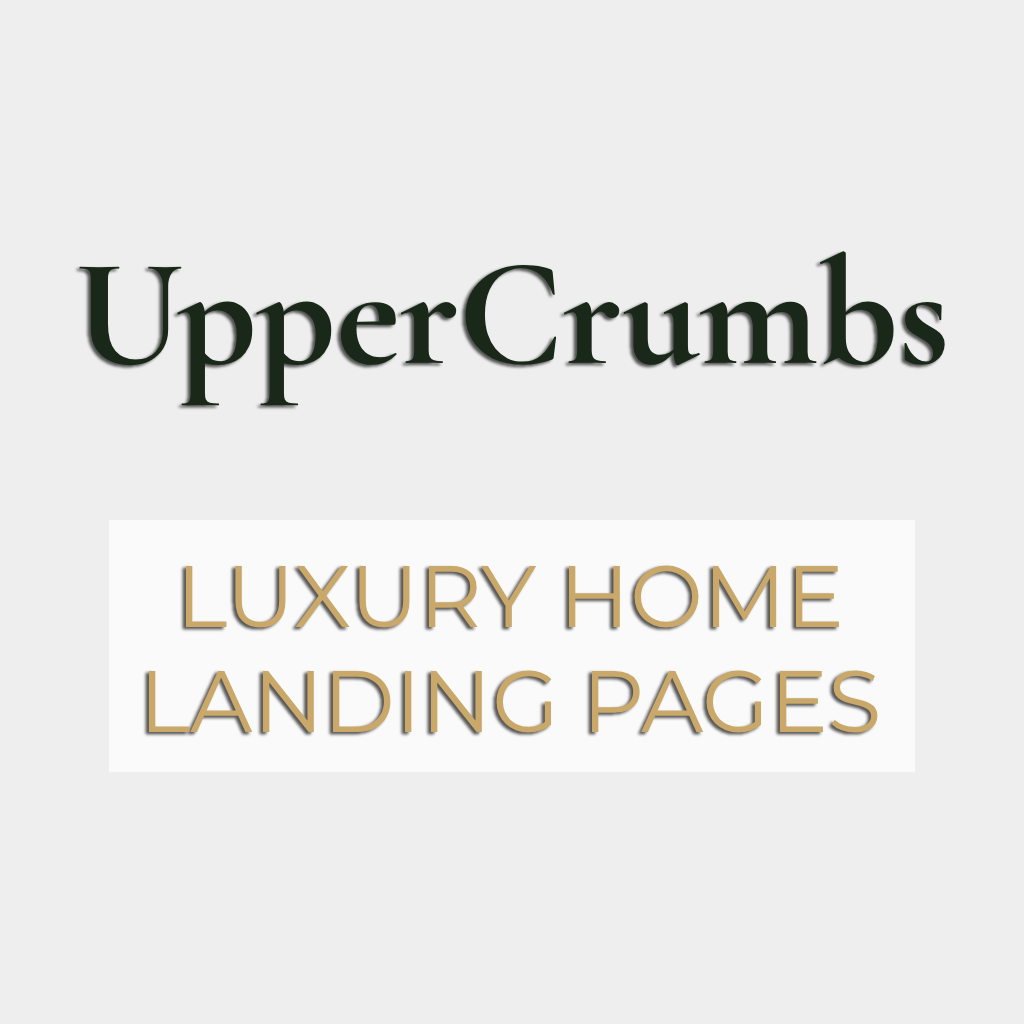
<style>
.page{position:relative;width:1024px;height:1024px;background:#eeeeee}
.page>*{position:absolute;margin:0}
.t1{font:154px "CormorantGaramond-Bold";color:#1a2819}
.t2{font:87px "Montserrat-Regular";color:#c9a86a}
</style>
<div class="page">
<p class="t1" style="left:79px;top:251px;width:866px;height:155px">UpperCrumbs</p>
<p class="t2" style="left:148px;top:565px;width:730px;height:168px;text-align:center">LUXURY HOME LANDING PAGES</p>
</div>
